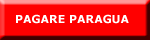
<style>
.page{position:relative;width:150px;height:40px;background:#ff0000}
.page>*{position:absolute;margin:0}
.t1{font:11px "Verdana-Bold";color:#ffffff}
</style>
<div class="page">
<p class="t1" style="left:16px;top:14px;width:113px;height:10px">PAGARE PARAGUA</p>
</div>
